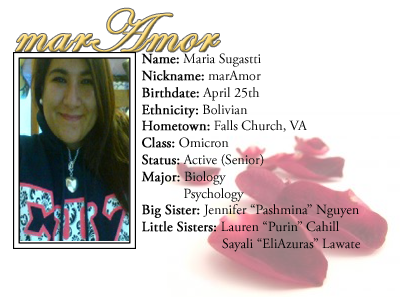
<style>
.page{position:relative;width:400px;height:300px;background:#ffffff}
.page>*{position:absolute;margin:0}
.t1{font:60px "EdwardianScriptITC";font-weight:bold}
.t2{font:14px "AGaramondPro-Regular";color:#000000}
.t3{font:14px "AGaramondPro-Regular";color:#000000;font-weight:bold}
</style>
<div class="page">
<p class="t1" style="left:15px;top:8px;width:205px;height:44px">marAmor</p>
<p class="t2" style="left:141px;top:53px;width:219px;height:199px"><span class="t3">Name:</span> Maria Sugastti<br><span class="t3">Nickname:</span> marAmor<br><span class="t3">Birthdate:</span> April 25th<br><span class="t3">Ethnicity:</span> Bolivian<br><span class="t3">Hometown:</span> Falls Church, VA<br><span class="t3">Class:</span> Omicron<br><span class="t3">Status:</span> Active (Senior)<br><span class="t3">Major:</span> Biology<br>            Psychology<br><span class="t3">Big Sister: </span>Jennifer “Pashmina” Nguyen<br><span class="t3">Little Sisters: </span>Lauren “Purin” Cahill<br>                       Sayali “EliAzuras” Lawate</p>
</div>
